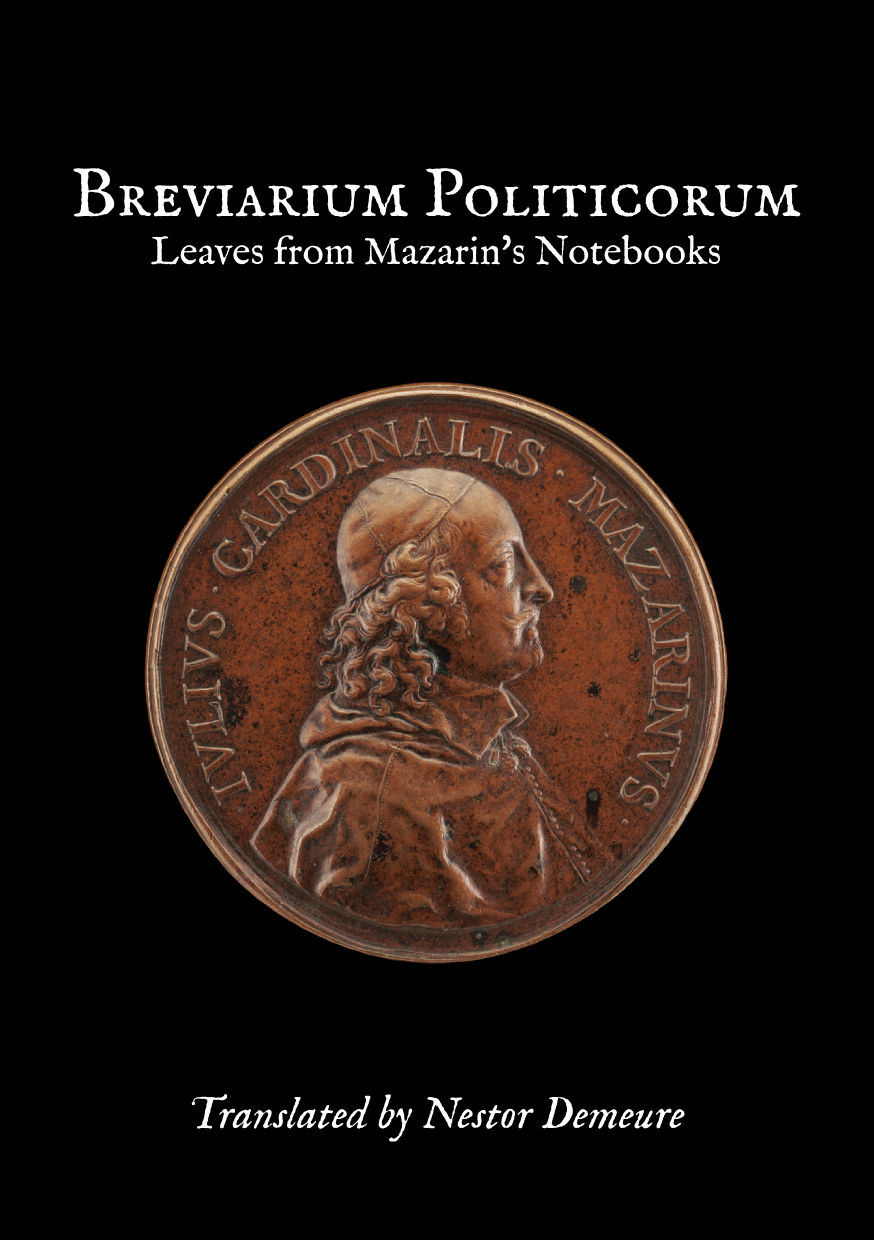
<style>
.page{position:relative;width:874px;height:1240px;background:#000000}
.page>*{position:absolute;margin:0}
.t1{font:40px "IM_FELL_English_Roman";color:#ffffff}
.t2{font:70px "IM_FELL_English_SC";color:#ffffff}
.t3{font:45px "IM_FELL_English_Italic";color:#ffffff}
</style>
<div class="page">
<p class="t1" style="left:73px;top:168px;width:728px;height:974px;text-align:center"><span class="t2">Breviarium Politicorum<br></span>Leaves from Mazarin's Notebooks<br><br><br><br><br><br><br><br><br><br><br><br><br><br><br><br><span class="t3">Translated by Nestor Demeure</span></p>
</div>
